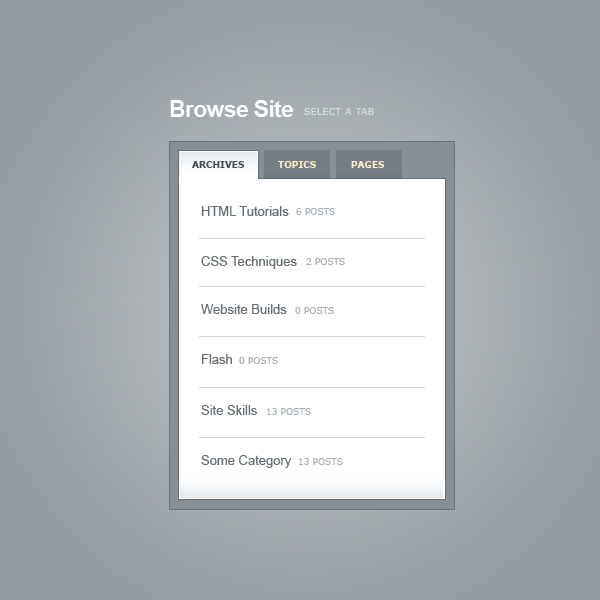
<style>
.page{position:relative;width:600px;height:600px;background:#ffffff}
.page>*{position:absolute;margin:0}
.t1{font:23px "Arial-BoldMT";letter-spacing:-0.03em;color:#ffffff}
.t2{font:9px "Verdana";letter-spacing:0.06em;color:#d3dbdf}
.t3{font:9px "Verdana-Bold";color:#434d53;text-transform:uppercase}
.t4{font:9px "Verdana-Bold";color:#fff0c6;text-transform:uppercase}
.t5{font:13px "ArialMT";color:#676f74}
.t6{font:9px "Verdana";color:#acb3b8}
</style>
<div class="page">
<p class="t1" style="left:170px;top:100px;width:123px;height:17px">Browse Site</p>
<p class="t2" style="left:304px;top:108px;width:70px;height:7px">SELECT A TAB</p>
<p class="t3" style="left:192px;top:161px;width:53px;height:7px">Archives</p>
<p class="t4" style="left:278px;top:161px;width:38px;height:7px">TOPICS</p>
<p class="t4" style="left:351px;top:161px;width:34px;height:7px">PAGES</p>
<p class="t5" style="left:201px;top:206px;width:88px;height:10px">HTML Tutorials</p>
<p class="t6" style="left:296px;top:208px;width:39px;height:7px">6 POSTS</p>
<p class="t5" style="left:201px;top:256px;width:96px;height:13px">CSS Techniques</p>
<p class="t6" style="left:306px;top:258px;width:39px;height:7px">2 POSTS</p>
<p class="t5" style="left:201px;top:304px;width:86px;height:10px">Website Builds</p>
<p class="t6" style="left:295px;top:307px;width:39px;height:7px">0 POSTS</p>
<p class="t5" style="left:202px;top:354px;width:30px;height:10px">Flash</p>
<p class="t6" style="left:239px;top:357px;width:39px;height:7px">0 POSTS</p>
<p class="t5" style="left:201px;top:405px;width:56px;height:10px">Site Skills</p>
<p class="t6" style="left:267px;top:408px;width:44px;height:7px">13 POSTS</p>
<p class="t5" style="left:201px;top:455px;width:91px;height:13px">Some Category</p>
<p class="t6" style="left:299px;top:458px;width:44px;height:7px">13 POSTS</p>
</div>
